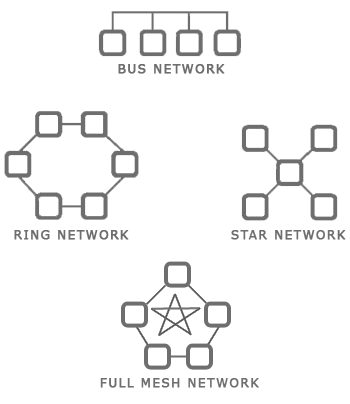
<style>
.page{position:relative;width:350px;height:404px;background:#ffffff}
.page>*{position:absolute;margin:0}
.t1{font:12px "Verdana";letter-spacing:0.1em;color:#6e6e6e;font-weight:bold}
</style>
<div class="page">
<p class="t1" style="left:118px;top:64px;width:107px;height:10px">BUS NETWORK</p>
<p class="t1" style="left:14px;top:230px;width:115px;height:10px">RING NETWORK</p>
<p class="t1" style="left:231px;top:230px;width:115px;height:10px">STAR NETWORK</p>
<p class="t1" style="left:100px;top:378px;width:159px;height:10px">FULL MESH NETWORK</p>
</div>
